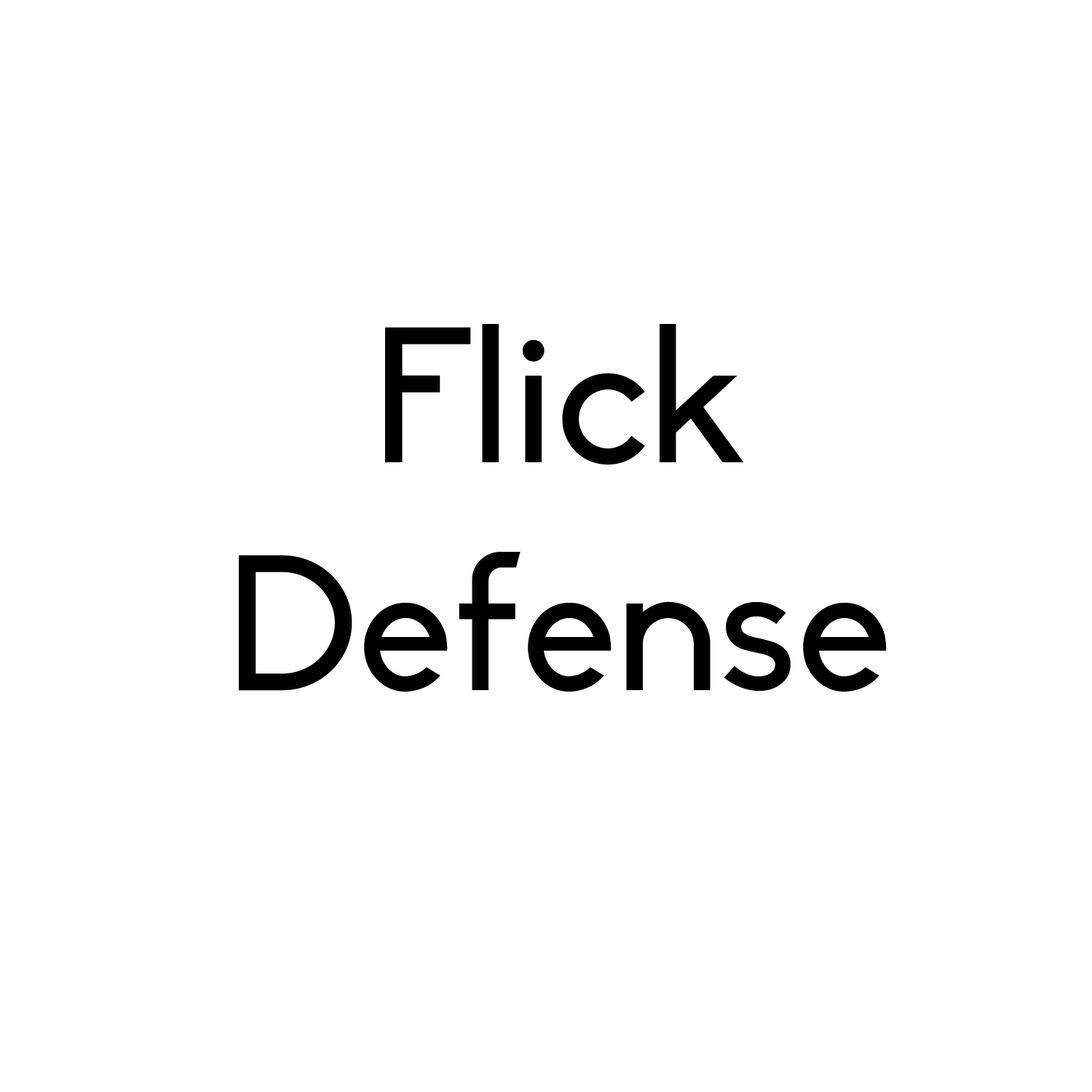
<style>
.page{position:relative;width:1092px;height:1092px;background:#ffffff}
.page>*{position:absolute;margin:0}
.t1{font:189.6px "Biko";color:#000000}
</style>
<div class="page">
<p class="t1" style="left:239px;top:324px;width:648px;height:368px;text-align:center">Flick<br>Defense</p>
</div>
